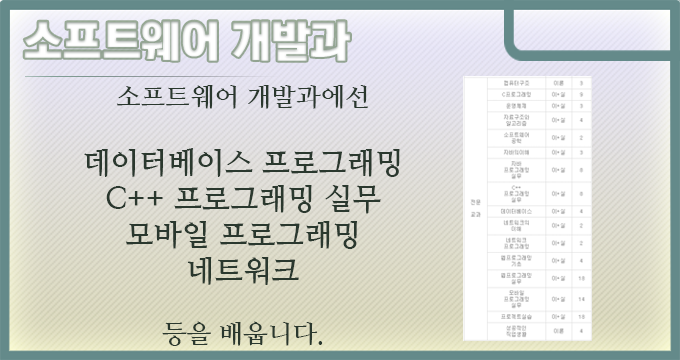
<style>
.page{position:relative;width:680px;height:360px}
.page>*{position:absolute;margin:0}
.t1{font:44px "KoreanTITGD5-R";letter-spacing:-0.01em;color:#ffffff}
.t2{font:30px "NanumMyeongjoBold";letter-spacing:-0.01em;color:#2a382e}
.t3{font:26px "NanumMyeongjoBold";letter-spacing:-0.01em;color:#2a382e}
</style>
<div class="page">
<p class="t1" style="left:24px;top:21px;width:326px;height:40px">소프트웨어 개발과</p>
<p class="t2" style="left:84px;top:85px;width:316px;height:261px;text-align:center"><span class="t3">소프트웨어 개발과에선<br><br></span>데이터베이스 프로그래밍<br>C++ 프로그래밍 실무<br>모바일 프로그래밍<br>네트워크 <br><span class="t3"><br>등을 배웁니다.</span></p>
</div>
